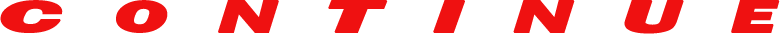
<style>
.page{position:relative;width:780px;height:34px;background:#ffffff}
.page>*{position:absolute;margin:0}
.t1{font:60px "Tactical-Espionage-Action";letter-spacing:0.9em;color:#ef1111;text-transform:uppercase;font-weight:bold}
</style>
<div class="page">
<p class="t1" style="left:0px;top:0px;width:780px;height:34px">Continue</p>
</div>
